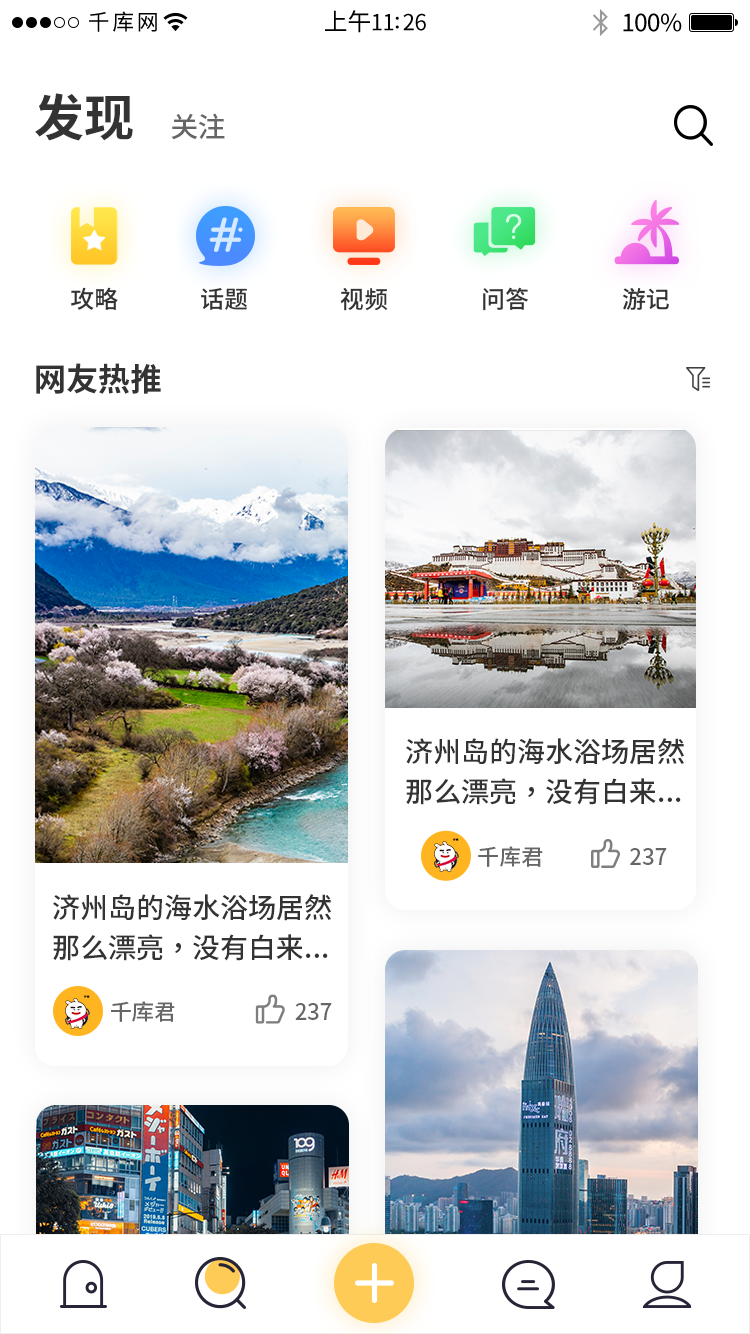
<style>
.page{position:relative;width:750px;height:1334px;background:#ffffff}
.page>*{position:absolute;margin:0}
.t1{font:50px "SourceHanSansSC-Bold";color:#333333}
.t2{font:28px "SourceHanSansSC-Medium";color:#666666}
.t3{font:24px "SourceHanSansSC-Medium";color:#333333}
.t4{font:32px "SourceHanSansSC-Bold";color:#333333}
.t5{font:28px/40px "SourceHanSansSC-Medium";color:#333333}
.t6{font:22px "SourceHanSansSC-Medium";color:#666666}
</style>
<div class="page">
<p class="t1" style="left:35px;top:93px;width:98px;height:48px">发现</p>
<p class="t2" style="left:171px;top:113px;width:54px;height:27px">关注</p>
<p class="t3" style="left:70px;top:287px;width:48px;height:23px">攻略</p>
<p class="t3" style="left:201px;top:288px;width:47px;height:22px">话题</p>
<p class="t3" style="left:340px;top:288px;width:48px;height:23px">视频</p>
<p class="t3" style="left:483px;top:287px;width:45px;height:24px">问答</p>
<p class="t3" style="left:622px;top:287px;width:47px;height:23px">游记</p>
<p class="t4" style="left:36px;top:363px;width:125px;height:31px">网友热推</p>
<p class="t5" style="left:406px;top:738px;width:278px;height:67px">济州岛的海水浴场居然<br>那么漂亮，没有白来...</p>
<p class="t6" style="left:478px;top:846px;width:65px;height:21px">千库君</p>
<p class="t6" style="left:630px;top:848px;width:37px;height:17px">237</p>
<p class="t5" style="left:53px;top:894px;width:278px;height:67px">济州岛的海水浴场居然<br>那么漂亮，没有白来...</p>
<p class="t6" style="left:111px;top:1001px;width:64px;height:21px">千库君</p>
<p class="t6" style="left:295px;top:1003px;width:37px;height:17px">237</p>
</div>
